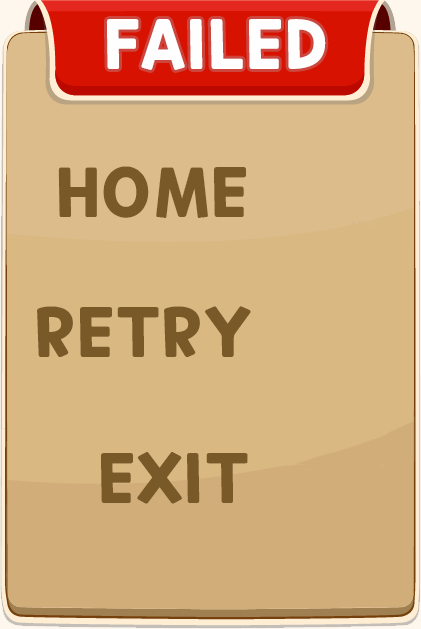
<style>
.page{position:relative;width:421px;height:629px;background:#d9b882}
.page>*{position:absolute;margin:0}
.t1{font:68px "CookieRun-Bold";color:#fefefe}
.t2{font:68px "CookieRun-Bold";color:#7a5929}
</style>
<div class="page">
<p class="t1" style="left:106px;top:19px;width:220px;height:51px">FAILED</p>
<p class="t2" style="left:58px;top:166px;width:188px;height:52px">HOME</p>
<p class="t2" style="left:37px;top:306px;width:214px;height:51px">RETRY</p>
<p class="t2" style="left:101px;top:452px;width:147px;height:52px">EXIT</p>
</div>
